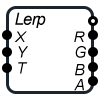
<style>
.page{position:relative;width:100px;height:100px;background:#ffffff}
.page>*{position:absolute;margin:0}
.t1{font:16.6px "Arial-ItalicMT";letter-spacing:-0.04em;color:#000000}
.t2{font:14.8px "Arial-ItalicMT";letter-spacing:-0.04em;color:#000000}
.t3{font:15.7px "Arial-ItalicMT";letter-spacing:-0.04em;color:#000000}
</style>
<div class="page">
<p class="t1" style="left:15px;top:12px;width:31px;height:16px">Lerp</p>
<p class="t2" style="left:14px;top:31px;width:13px;height:11px">X</p>
<p class="t2" style="left:74px;top:31px;width:11px;height:11px">R</p>
<p class="t3" style="left:18px;top:46px;width:10px;height:12px">Y</p>
<p class="t3" style="left:75px;top:46px;width:11px;height:12px">G</p>
<p class="t3" style="left:18px;top:62px;width:10px;height:12px">T</p>
<p class="t3" style="left:75px;top:64px;width:10px;height:12px">B</p>
<p class="t3" style="left:74px;top:79px;width:10px;height:12px">A</p>
</div>
